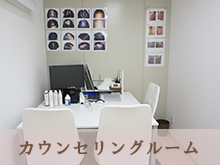
<style>
.page{position:relative;width:220px;height:165px}
.page>*{position:absolute;margin:0}
.t1{font:17px "HGSSoeiPresenceEB";letter-spacing:0.075em;color:#73523f}
</style>
<div class="page">
<p class="t1" style="left:19px;top:140px;width:179px;height:15px">カウンセリングルーム</p>
</div>
